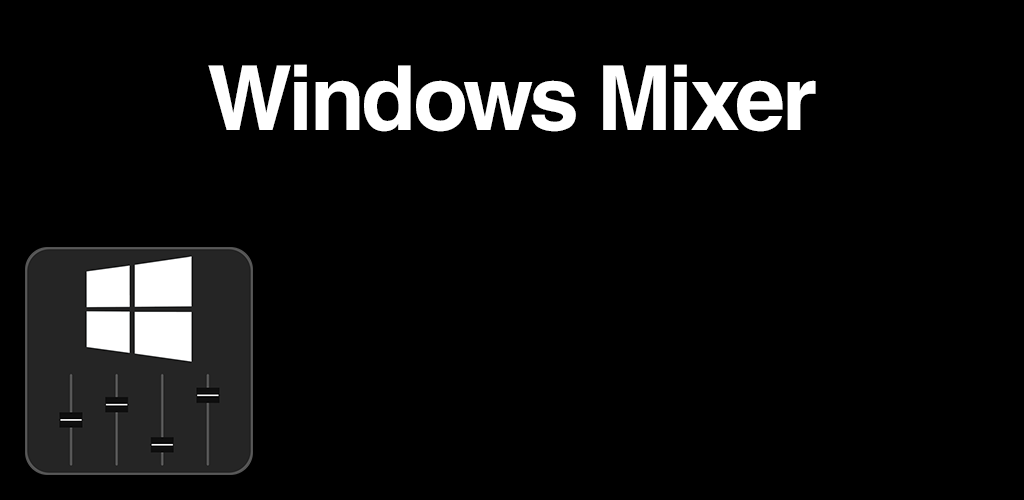
<style>
.page{position:relative;width:1024px;height:500px;background:#000000}
.page>*{position:absolute;margin:0}
.t1{font:90px "Helvetica-Bold";letter-spacing:-0.04em;color:#ffffff}
.t2{font:30px "Helvetica-Bold";color:#ffffff}
</style>
<div class="page">
<p class="t1" style="left:208px;top:64px;width:608px;height:68px"><span class="t2"><br></span>Windows Mixer</p>
</div>
